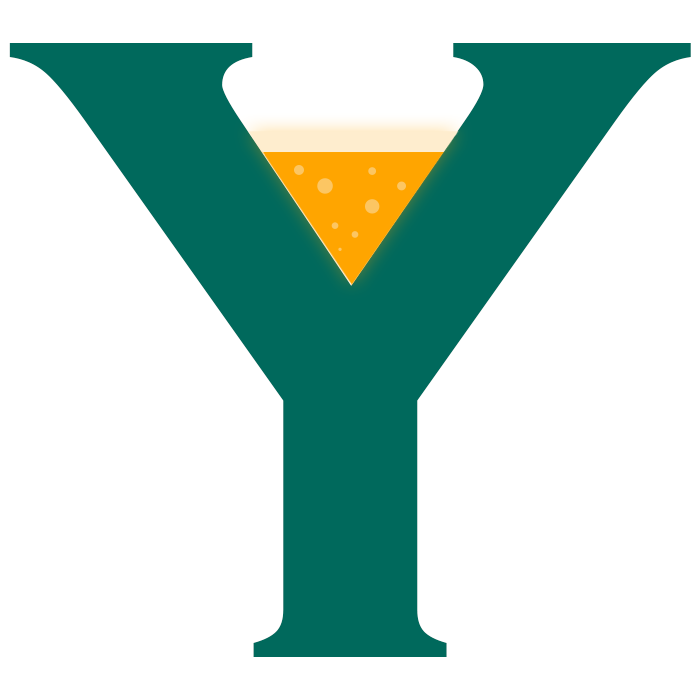
<style>
.page{position:relative;width:700px;height:700px;background:#ffffff}
.page>*{position:absolute;margin:0}
.t1{font:920.7px "CopperplateGothic-Bold";color:#00695c}
</style>
<div class="page">
<p class="t1" style="left:9px;top:43px;width:682px;height:614px">Y</p>
</div>
